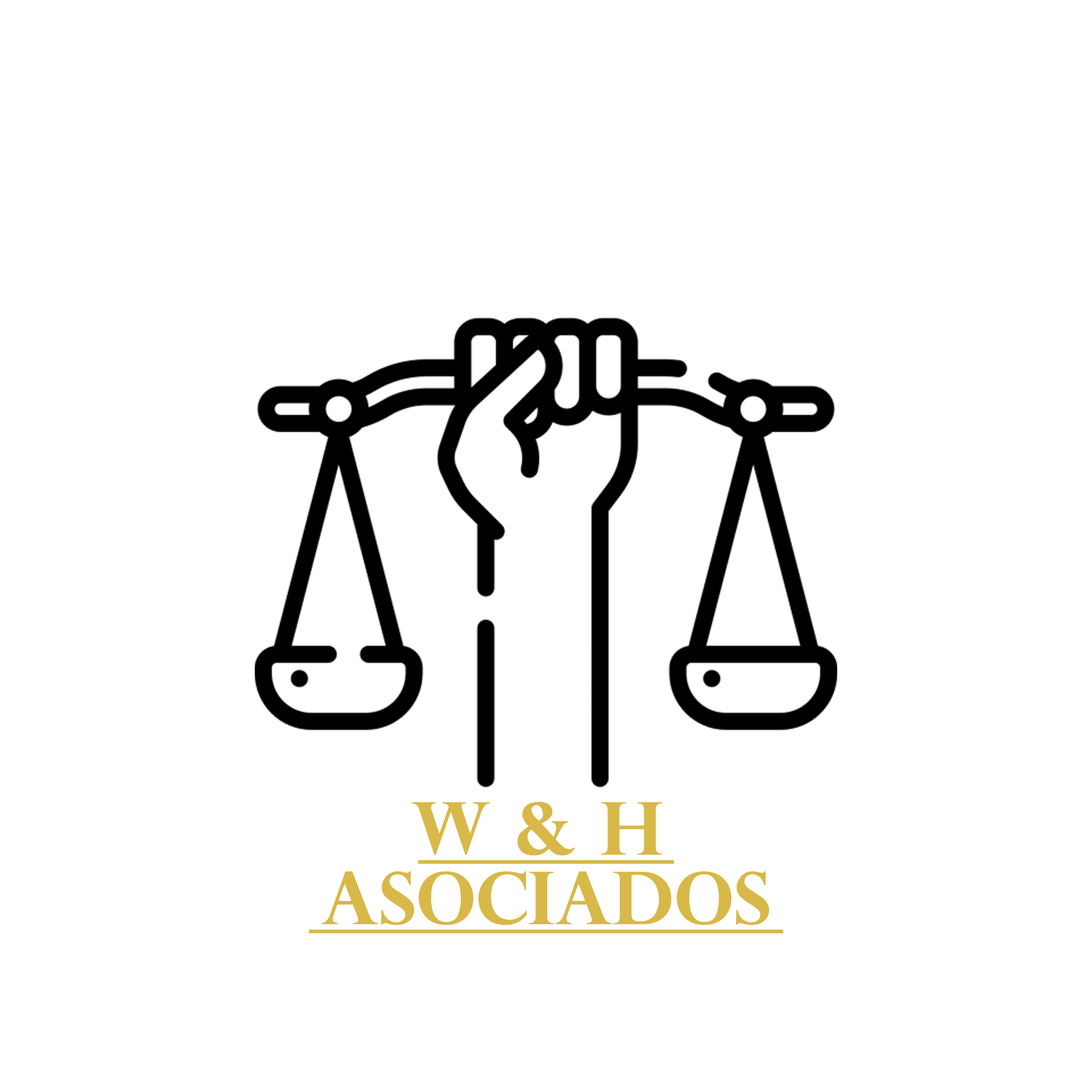
<style>
.page{position:relative;width:1092px;height:1092px;background:#ffffff}
.page>*{position:absolute;margin:0}
.t1{font:72.8px "PerpetuaTitlingMT-Bold";color:#d8b848}
</style>
<div class="page">
<p class="t1" style="left:412px;top:802px;width:250px;height:53px">W &amp; H</p>
<p class="t1" style="left:418px;top:860px;width:256px;height:4px">_______</p>
<p class="t1" style="left:322px;top:871px;width:447px;height:54px">ASOCIADOS</p>
<p class="t1" style="left:309px;top:930px;width:474px;height:3px">_____________</p>
</div>
